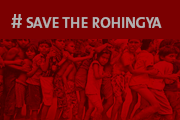
<style>
.page{position:relative;width:180px;height:120px;background:#7b0001}
.page>*{position:absolute;margin:0}
.t1{font:15px "TheSans-Bold";color:#b2b1b1}
.t2{font:20px "TheSans-Bold";color:#b2b1b1}
</style>
<div class="page">
<p class="t1" style="left:11px;top:14px;width:151px;height:14px"><span class="t2">#</span> SAVE THE ROHINGYA</p>
</div>
